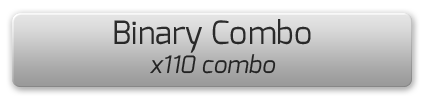
<style>
.page{position:relative;width:425px;height:100px}
.page>*{position:absolute;margin:0}
.t1{font:32px "Exo-Regular";color:#2a2a2a}
.t2{font:24px "Exo-Italic";color:#2a2a2a}
</style>
<div class="page">
<p class="t1" style="left:114px;top:19px;width:197px;height:55px;text-align:center">Binary Combo<br><span class="t2">x110 combo</span></p>
</div>
